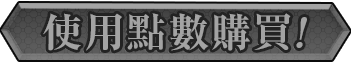
<style>
.page{position:relative;width:351px;height:63px}
.page>*{position:absolute;margin:0}
.t1{font:40px "RyuminPr6N-ExBold";letter-spacing:0.075em;color:#a3a3a3}
.t2{font:40px "RyuminPr6N-ExBold";letter-spacing:0.075em;color:#a3a3a3;font-style:italic}
</style>
<div class="page">
<p class="t1" style="left:43px;top:13px;width:264px;height:38px">使用點數購買<span class="t2">!</span></p>
</div>
